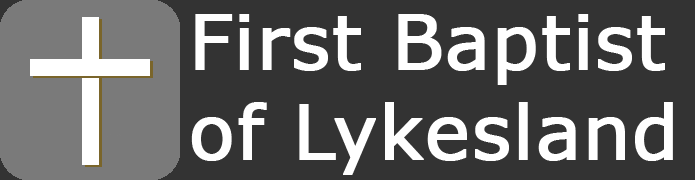
<style>
.page{position:relative;width:695px;height:180px;background:#333333}
.page>*{position:absolute;margin:0}
.t1{font:75px "Verdana";color:#ffffff;font-weight:bold}
</style>
<div class="page">
<p class="t1" style="left:191px;top:14px;width:482px;height:161px">First Baptist<br>of Lykesland</p>
</div>
